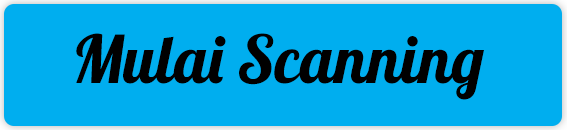
<style>
.page{position:relative;width:567px;height:130px;background:#00aeef}
.page>*{position:absolute;margin:0}
.t1{font:66px "Lobster1.4";color:#060808}
</style>
<div class="page">
<p class="t1" style="left:76px;top:33px;width:408px;height:67px">Mulai Scanning</p>
</div>
